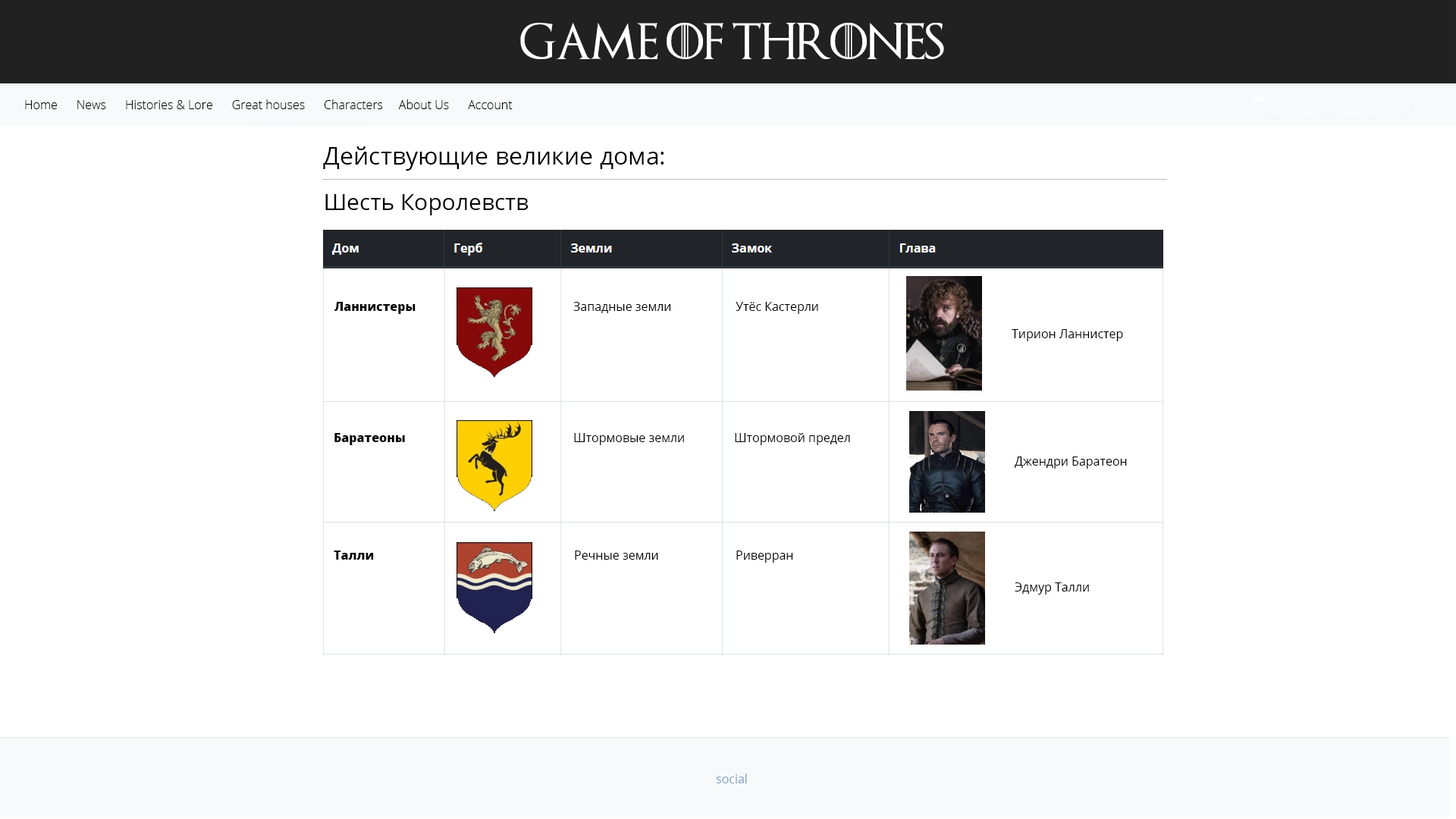
<style>
.page{position:relative;width:1456px;height:819px;background:#ffffff}
.page>*{position:absolute;margin:0}
.t1{font:36.4px "GameofThrones";color:#ffffff}
.t2{font:12.1px "OpenSans-Light";color:#000000}
.t3{font:24.3px "OpenSans-Regular";color:#000000}
.t4{font:22.7px "OpenSans-Regular";color:#000000}
.t5{font:12.1px "OpenSans-ExtraBold";color:#000000}
.t6{font:12.1px "OpenSans-Regular";color:#000000}
.t7{font:12.1px "OpenSans-Regular";color:#83a3c4}
</style>
<div class="page">
<p class="t1" style="left:520px;top:23px;width:424px;height:36px">Game of Thrones</p>
<p class="t2" style="left:25px;top:99px;width:488px;height:10px">Home      News      Histories &amp; Lore      Great houses      Сharacters     About Us      Account</p>
<p class="t3" style="left:323px;top:146px;width:341px;height:25px">Действующие великие дома:</p>
<p class="t4" style="left:325px;top:194px;width:204px;height:21px">Шесть Королевств</p>
<p class="t5" style="left:334px;top:302px;width:82px;height:12px">Ланнистеры</p>
<p class="t6" style="left:573px;top:302px;width:98px;height:11px">Западные земли</p>
<p class="t6" style="left:736px;top:302px;width:82px;height:12px">Утёс Кастерли</p>
<p class="t6" style="left:1012px;top:329px;width:111px;height:12px">Тирион Ланнистер</p>
<p class="t5" style="left:334px;top:433px;width:71px;height:12px">Баратеоны</p>
<p class="t6" style="left:574px;top:433px;width:110px;height:12px">Штормовые земли</p>
<p class="t6" style="left:735px;top:433px;width:115px;height:12px">Штормовой предел</p>
<p class="t6" style="left:1015px;top:457px;width:112px;height:12px">Джендри Баратеон</p>
<p class="t5" style="left:334px;top:551px;width:40px;height:9px">Талли</p>
<p class="t6" style="left:575px;top:551px;width:83px;height:9px">Речные земли</p>
<p class="t6" style="left:736px;top:551px;width:57px;height:12px">Риверран</p>
<p class="t6" style="left:1015px;top:582px;width:74px;height:13px">Эдмур Талли</p>
<p class="t7" style="left:716px;top:773px;width:31px;height:10px">social</p>
</div>
